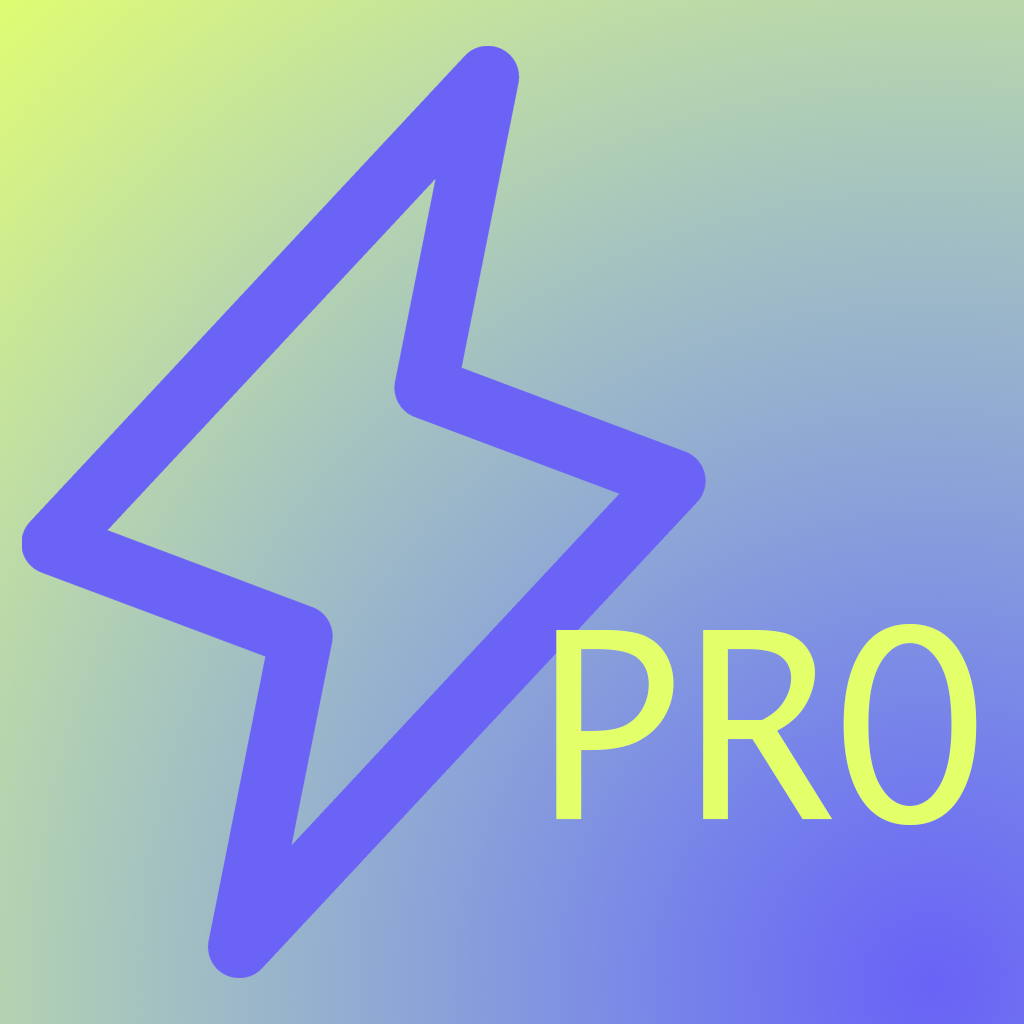
<style>
.page{position:relative;width:1024px;height:1024px}
.page>*{position:absolute;margin:0}
.t1{font:250px "Ayuthaya";color:#e3ff6a}
</style>
<div class="page">
<p class="t1" style="left:556px;top:624px;width:421px;height:201px">PRO</p>
</div>
